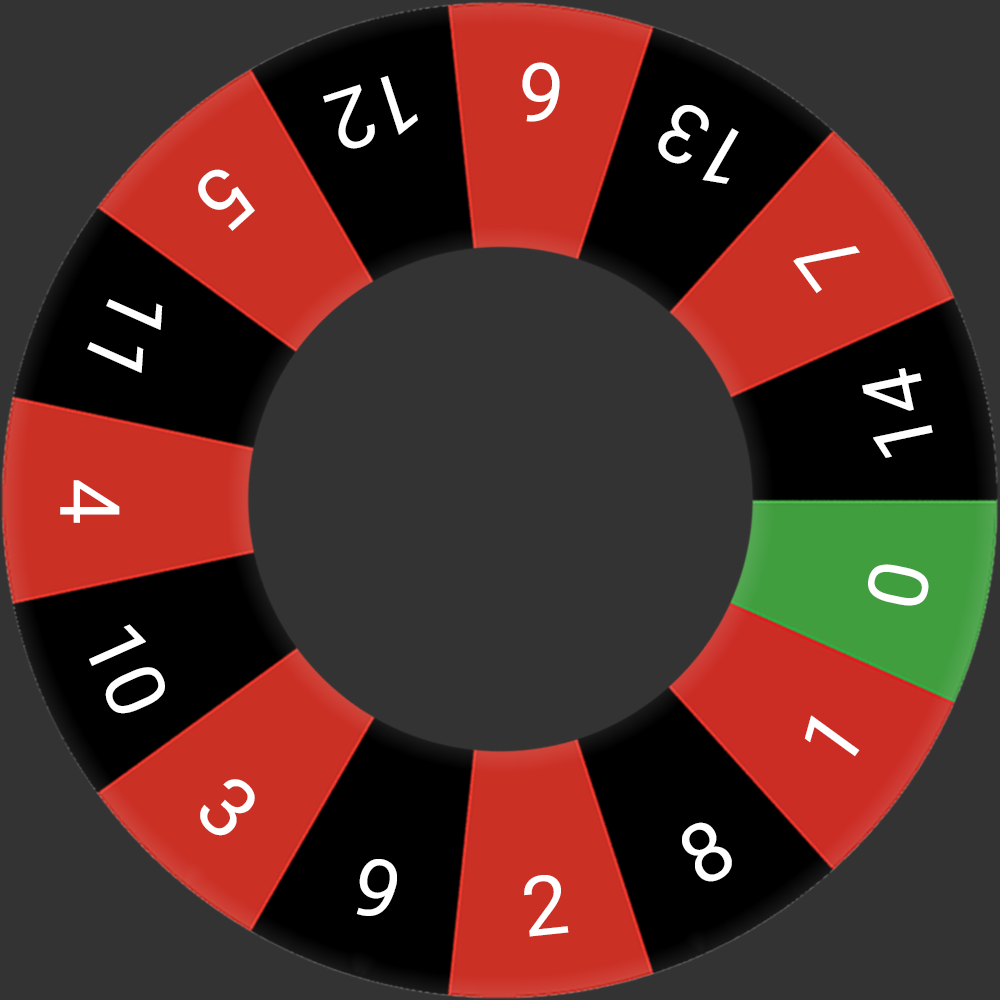
<style>
.page{position:relative;width:1000px;height:1000px;background:#333333}
.page>*{position:absolute;margin:0}
.t1{font:83px "Roboto-Regular";color:#ffffff}
</style>
<div class="page">
<p class="t1" style="left:522px;top:62px;width:38px;height:60px;rotate:-174deg">6</p>
<p class="t1" style="left:323px;top:75px;width:95px;height:74px;rotate:162deg">12</p>
<p class="t1" style="left:658px;top:105px;width:81px;height:79px;rotate:-150deg">13</p>
<p class="t1" style="left:198px;top:169px;width:57px;height:62px;rotate:138deg">5</p>
<p class="t1" style="left:793px;top:246px;width:67px;height:48px;rotate:-126deg">7</p>
<p class="t1" style="left:87px;top:299px;width:76px;height:74px;rotate:114deg">11</p>
<p class="t1" style="left:862px;top:368px;width:71px;height:90px;rotate:-102deg">14</p>
<p class="t1" style="left:60px;top:480px;width:60px;height:43px;rotate:90deg">4</p>
<p class="t1" style="left:868px;top:564px;width:61px;height:42px;rotate:-78deg">0</p>
<p class="t1" style="left:89px;top:624px;width:76px;height:90px;rotate:66deg">10</p>
<p class="t1" style="left:804px;top:715px;width:56px;height:42px;rotate:-54deg">1</p>
<p class="t1" style="left:200px;top:779px;width:55px;height:57px;rotate:42deg">3</p>
<p class="t1" style="left:682px;top:822px;width:50px;height:60px;rotate:-30deg">8</p>
<p class="t1" style="left:356px;top:859px;width:41px;height:57px;rotate:18deg">9</p>
<p class="t1" style="left:524px;top:875px;width:45px;height:62px;rotate:-6deg">2</p>
</div>
